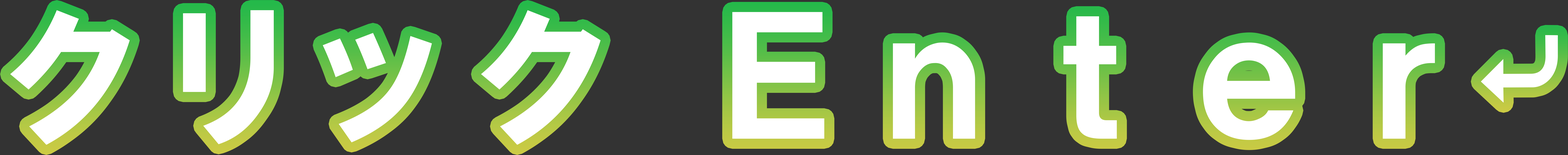
<style>
.page{position:relative;width:1568px;height:155px;background:#333333}
.page>*{position:absolute;margin:0}
.t1{font:156.9px "HGSoeiKakugothicUB";color:#ffffff}
</style>
<div class="page">
<p class="t1" style="left:10px;top:10px;width:1425px;height:134px">クリック Ｅｎｔｅｒ</p>
</div>
